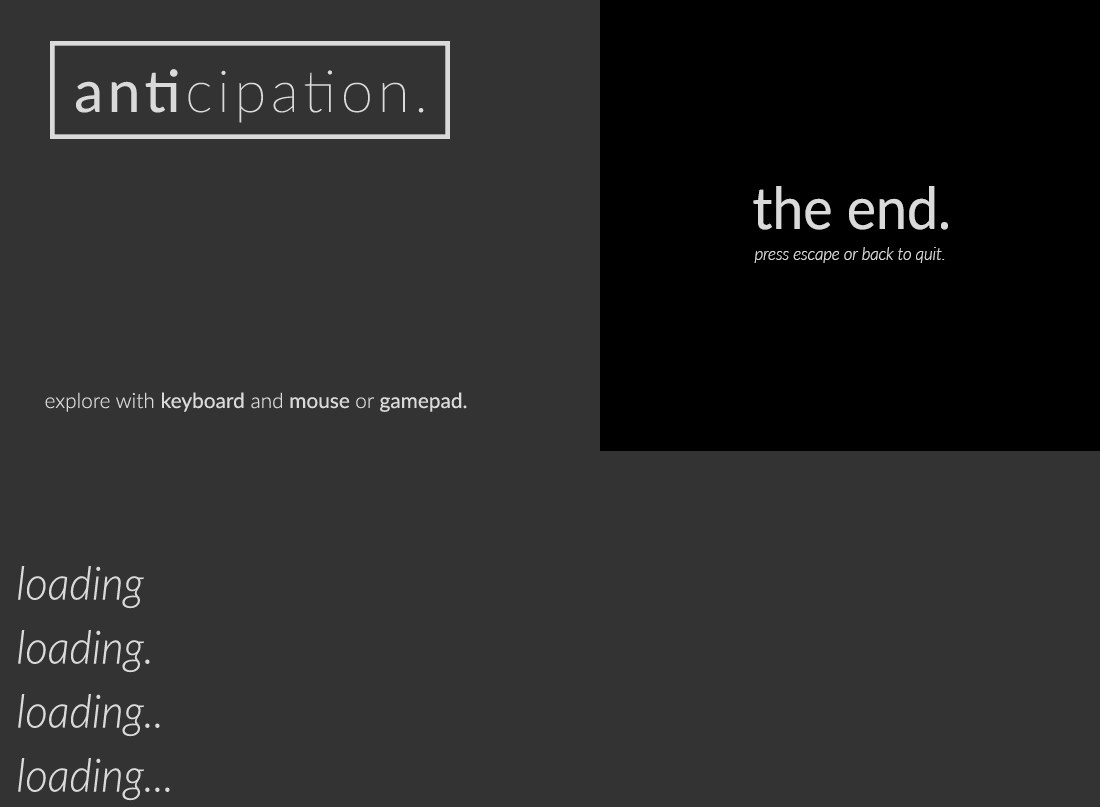
<style>
.page{position:relative;width:1100px;height:807px;background:#333333}
.page>*{position:absolute;margin:0}
.t1{font:58.3px "Lato-Thin";letter-spacing:0.08em;color:#dadada}
.t2{font:58.3px "Lato-Regular";letter-spacing:0.08em;color:#dadada}
.t3{font:58.3px "Lato-Regular";color:#dadada;scale:0.95 1}
.t4{font:17.5px "Lato-LightItalic";color:#dadada;scale:0.95 1}
.t5{font:20.8px "Lato-Light";color:#dadada}
.t6{font:20.8px "Lato-Regular";color:#dadada}
.t7{font:45.8px "Lato-LightItalic";color:#dadada;scale:0.95 1}
</style>
<div class="page">
<p class="t1" style="left:76px;top:69px;width:348px;height:54px"><span class="t2">anti</span>cipation.</p>
<p class="t3" style="left:753px;top:186px;width:195px;height:44px">the end.</p>
<p class="t4" style="left:754px;top:247px;width:191px;height:16px">press escape or back to quit.</p>
<p class="t5" style="left:45px;top:392px;width:422px;height:20px">explore with <span class="t6">keyboard </span>and <span class="t6">mouse </span>or<span class="t6"> gamepad.</span></p>
<p class="t7" style="left:18px;top:566px;width:126px;height:43px">loading</p>
<p class="t7" style="left:18px;top:630px;width:132px;height:43px">loading.</p>
<p class="t7" style="left:18px;top:694px;width:142px;height:43px">loading..</p>
<p class="t7" style="left:18px;top:758px;width:152px;height:43px">loading...</p>
</div>
